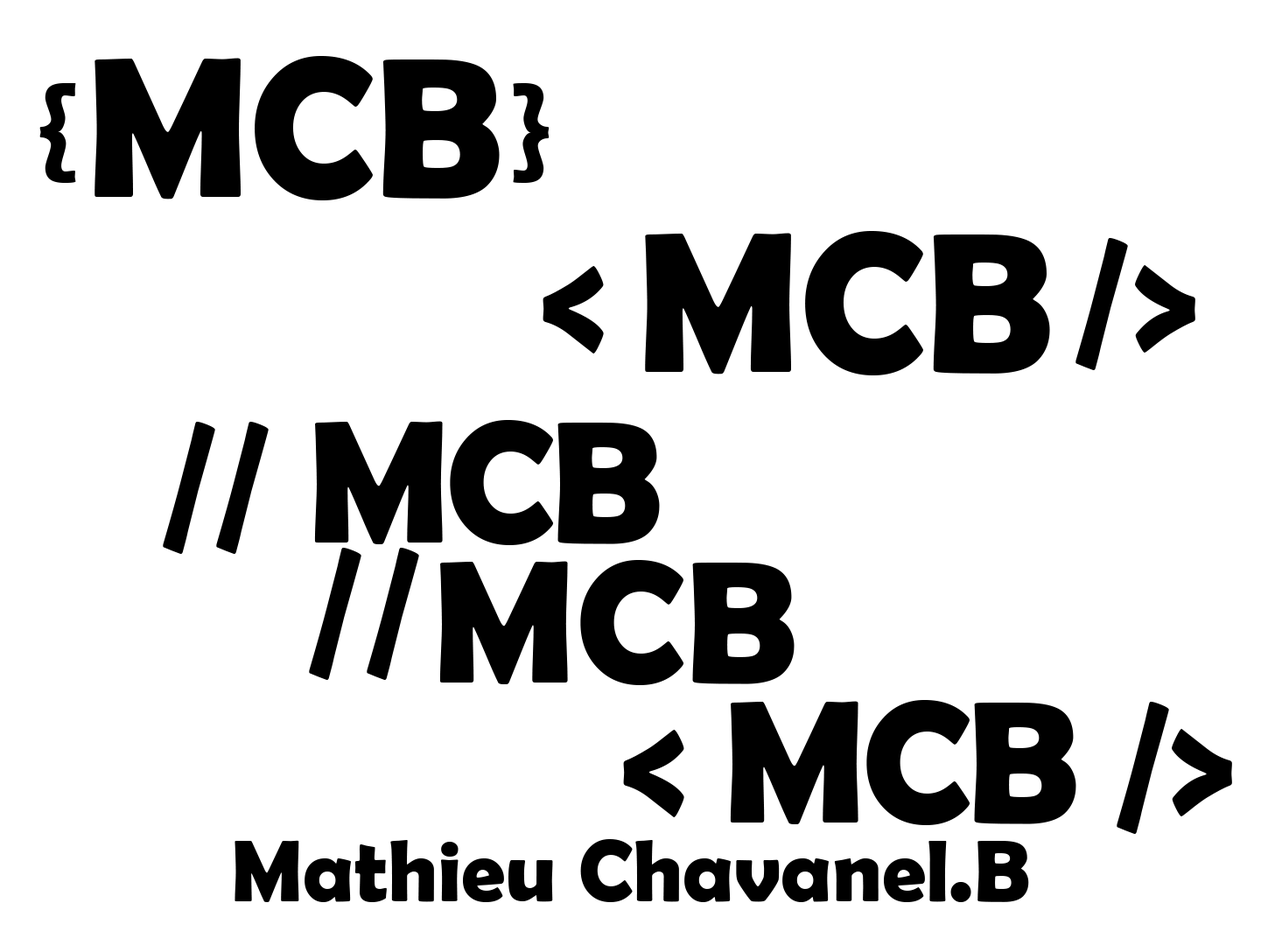
<style>
.page{position:relative;width:1261px;height:945px;background:#ffffff}
.page>*{position:absolute;margin:0}
.t1{font:200.1px "BerlinSansFBDemi-Bold";color:#000000}
.t2{font:175.1px "BerlinSansFBDemi-Bold";letter-spacing:-0.025em;color:#000000}
.t3{font:175.1px "BerlinSansFBDemi-Bold";color:#000000}
.t4{font:87.5px "BerlinSansFBDemi-Bold";color:#000000}
</style>
<div class="page">
<p class="t1" style="left:95px;top:56px;width:405px;height:144px">MCB</p>
<p class="t1" style="left:645px;top:231px;width:405px;height:145px">MCB</p>
<p class="t2" style="left:163px;top:420px;width:497px;height:134px">// MCB</p>
<p class="t3" style="left:309px;top:548px;width:110px;height:132px">//</p>
<p class="t3" style="left:439px;top:560px;width:356px;height:125px">MCB</p>
<p class="t2" style="left:623px;top:700px;width:609px;height:134px">&lt; MCB /&gt;</p>
<p class="t4" style="left:235px;top:839px;width:794px;height:63px">Mathieu Chavanel.B</p>
</div>
